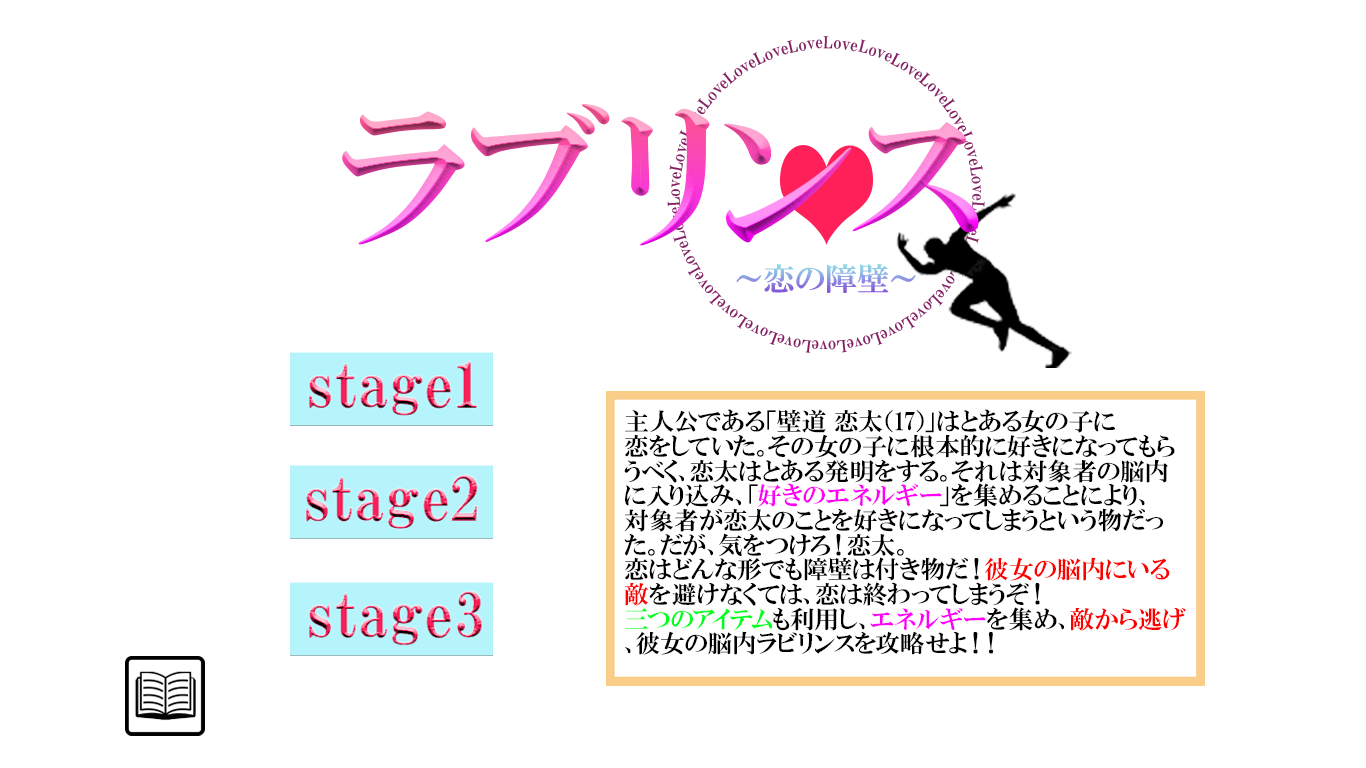
<style>
.page{position:relative;width:1366px;height:768px;background:#ffffff}
.page>*{position:absolute;margin:0}
.t1{font:158.3px "HGPMinchoE"}
.t2{font:31.9px "HGPMinchoE"}
.t3{font:24.6px/24.6px "HGPMinchoE";color:#000000}
.t4{font:24.6px/24.6px "HGPMinchoE";color:#ff00f6}
.t5{font:24.6px/24.6px "HGPMinchoE";color:#ff0000}
.t6{font:24.6px/24.6px "HGPMinchoE";color:#00ff1e}
</style>
<div class="page">
<p class="t1" style="left:342px;top:104px;width:637px;height:142px">ラブリンス</p>
<p class="t2" style="left:736px;top:263px;width:180px;height:30px">～恋の障壁～</p>
<p class="t3" style="left:624px;top:409px;width:562px;height:246px">主人公である「壁道 恋太（17）」はとある女の子に<br>恋をしていた。その女の子に根本的に好きになってもらうべく、恋太はとある発明をする。それは対象者の脳内に入り込み、「<span class="t4">好きのエネルギー</span>」を集めることにより、<br>対象者が恋太のことを好きになってしまうという物だった。だが、気をつけろ！恋太。<br>恋はどんな形でも障壁は付き物だ！<span class="t5">彼女の脳内にいる敵</span>を避けなくては、恋は終わってしまうぞ！<br><span class="t6">三つのアイテム</span>も利用し、<span class="t4">エネルギー</span>を集め、<span class="t5">敵から逃げ</span>、彼女の脳内ラビリンスを攻略せよ！！</p>
</div>
